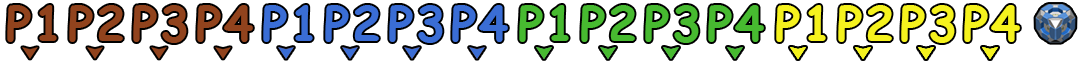
<style>
.page{position:relative;width:1088px;height:64px;background:#ffffff}
.page>*{position:absolute;margin:0}
.t1{font:48px "ComicSansMS-Bold";letter-spacing:0.05em;color:#91431d}
.t2{font:48px "ComicSansMS-Bold";letter-spacing:0.05em;color:#3a6dd5}
.t3{font:48px "ComicSansMS-Bold";letter-spacing:0.05em;color:#47ba30}
.t4{font:48px "ComicSansMS-Bold";letter-spacing:0.05em;color:#f5f21e}
</style>
<div class="page">
<p class="t1" style="left:7px;top:5px;width:50px;height:37px">P1</p>
<p class="t1" style="left:69px;top:5px;width:54px;height:37px">P2</p>
<p class="t1" style="left:133px;top:5px;width:54px;height:38px">P3</p>
<p class="t1" style="left:197px;top:5px;width:56px;height:37px">P4</p>
<p class="t2" style="left:263px;top:5px;width:50px;height:37px">P1</p>
<p class="t2" style="left:325px;top:5px;width:54px;height:37px">P2</p>
<p class="t2" style="left:389px;top:5px;width:54px;height:38px">P3</p>
<p class="t2" style="left:452px;top:5px;width:56px;height:37px">P4</p>
<p class="t3" style="left:519px;top:5px;width:50px;height:37px">P1</p>
<p class="t3" style="left:581px;top:5px;width:54px;height:37px">P2</p>
<p class="t3" style="left:645px;top:5px;width:54px;height:38px">P3</p>
<p class="t3" style="left:708px;top:5px;width:56px;height:37px">P4</p>
<p class="t4" style="left:776px;top:5px;width:50px;height:37px">P1</p>
<p class="t4" style="left:838px;top:5px;width:54px;height:37px">P2</p>
<p class="t4" style="left:901px;top:5px;width:54px;height:38px">P3</p>
<p class="t4" style="left:964px;top:5px;width:56px;height:37px">P4</p>
</div>
